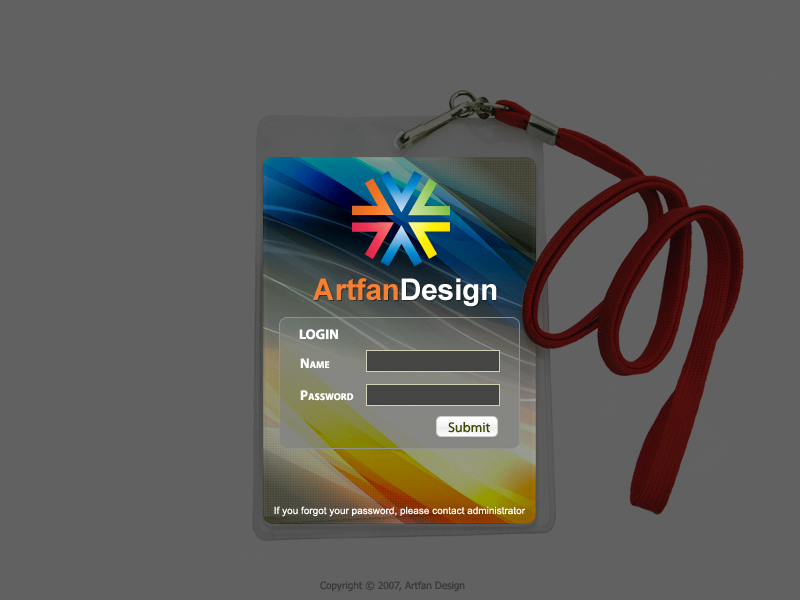
<style>
.page{position:relative;width:800px;height:600px;background:#616161}
.page>*{position:absolute;margin:0}
.t1{font:30px "Arial-BoldMT";letter-spacing:-0.01em;color:#f58031}
.t2{font:30px "Arial-BoldMT";letter-spacing:-0.01em;color:#ffffff}
.t3{font:14px "MyriadPro-Bold";color:#ffffff;font-variant:small-caps}
.t4{font:14px/16px "MyriadPro-Bold";color:#ffffff;font-variant:small-caps}
.t5{font:14px "MyriadPro-Regular";color:#3f4c06}
.t6{font:10px "ArialMT";color:#fefefe}
.t7{font:10px "Tahoma";color:#3a3939}
</style>
<div class="page">
<p class="t1" style="left:313px;top:278px;width:184px;height:29px">Artfan<span class="t2">Design</span></p>
<p class="t3" style="left:299px;top:329px;width:39px;height:11px">LOGIN</p>
<p class="t4" style="left:300px;top:358px;width:54px;height:43px">Name<br><br>Password</p>
<p class="t5" style="left:448px;top:422px;width:42px;height:11px">Submit</p>
<p class="t6" style="left:274px;top:506px;width:252px;height:11px">If you forgot your password, please contact administrator</p>
<p class="t7" style="left:320px;top:581px;width:145px;height:11px">Copyright © 2007, Artfan Design</p>
</div>
